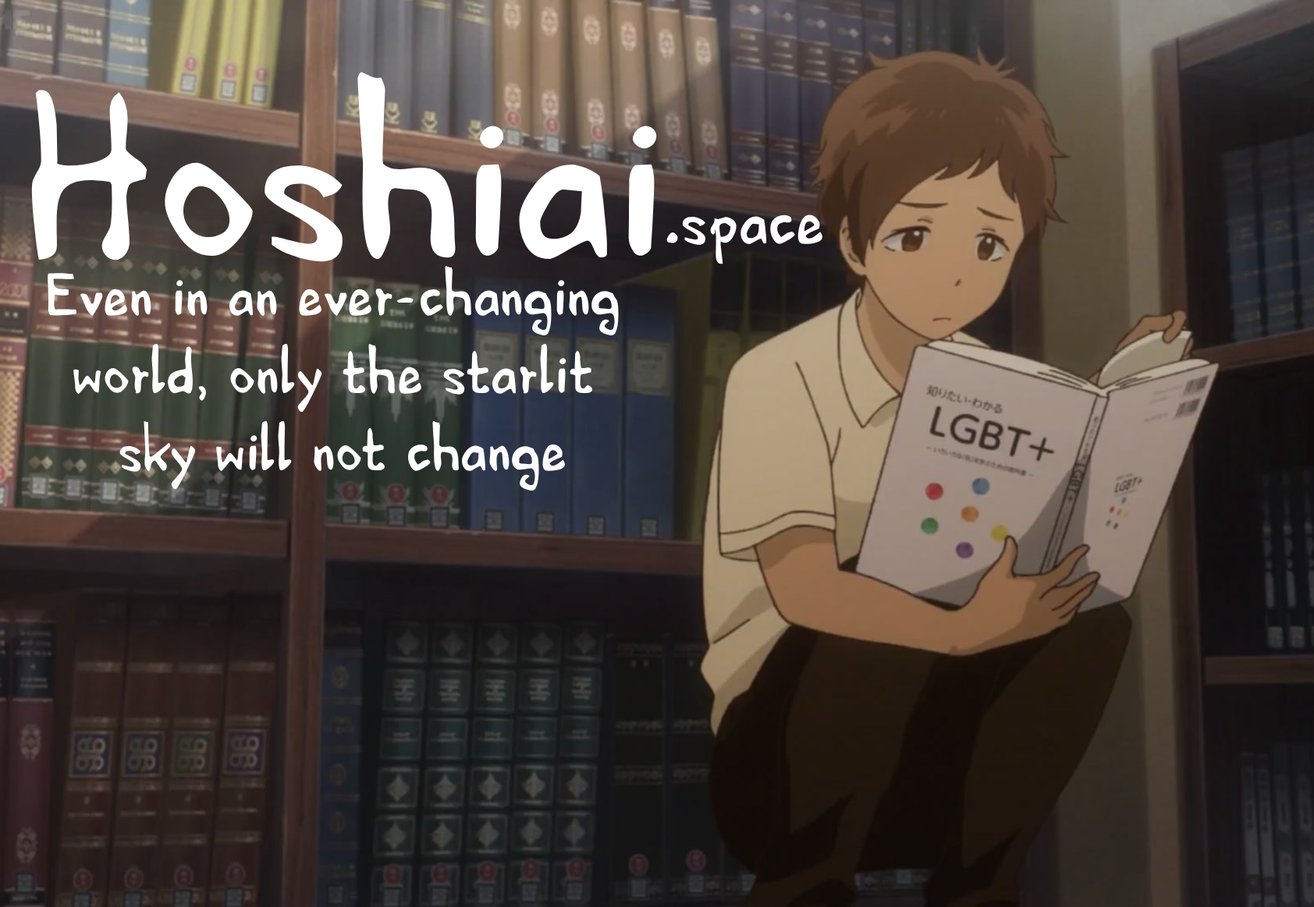
<style>
.page{position:relative;width:1314px;height:907px}
.page>*{position:absolute;margin:0}
.t1{font:242.9px "HVDEdding780-Normal";color:#ffffff}
.t2{font:71px "HVDEdding780-Normal";color:#ffffff}
.t3{font:64.8px "HVDEdding780-Normal";color:#ffffff}
</style>
<div class="page">
<p class="t1" style="left:31px;top:72px;width:626px;height:190px">Hoshiai</p>
<p class="t2" style="left:666px;top:215px;width:157px;height:50px">.space</p>
<p class="t3" style="left:48px;top:265px;width:571px;height:227px;text-align:center">Even in an ever-changing <br>world, only the starlit <br>sky will not change</p>
</div>
